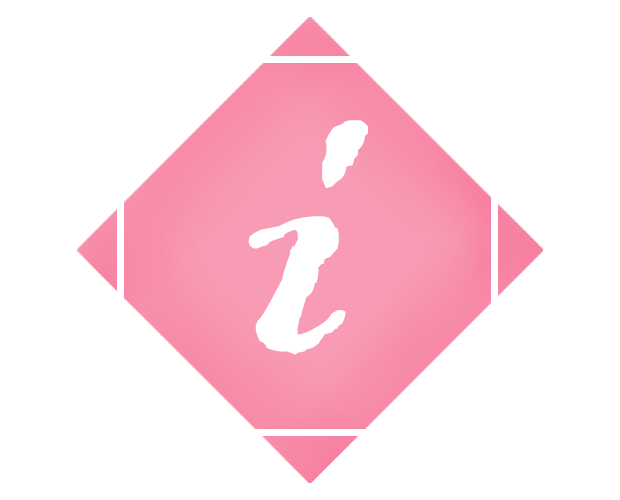
<style>
.page{position:relative;width:620px;height:500px;background:#ffffff}
.page>*{position:absolute;margin:0}
.t1{font:478.9px "BlackadderITC-Regular";color:#ffffff}
</style>
<div class="page">
<p class="t1" style="left:248px;top:120px;width:120px;height:235px">i</p>
</div>
